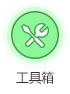
<style>
.page{position:relative;width:70px;height:94px;background:#ffffff}
.page>*{position:absolute;margin:0}
.t1{font:13px "MicrosoftYaHei";color:#323232}
</style>
<div class="page">
<p class="t1" style="left:16px;top:71px;width:38px;height:13px">工具箱</p>
</div>
